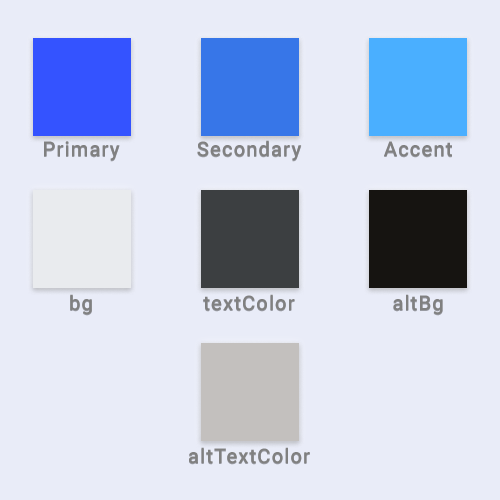
<style>
.page{position:relative;width:500px;height:500px;background:#e9ecf8}
.page>*{position:absolute;margin:0}
.t1{font:20.3px "Roboto-Medium";letter-spacing:0.05em;color:#808080}
</style>
<div class="page">
<p class="t1" style="left:44px;top:141px;width:76px;height:20px">Primary</p>
<p class="t1" style="left:197px;top:140px;width:105px;height:21px">Secondary</p>
<p class="t1" style="left:384px;top:141px;width:68px;height:16px">Accent</p>
<p class="t1" style="left:70px;top:294px;width:22px;height:21px">bg</p>
<p class="t1" style="left:203px;top:294px;width:92px;height:17px">textColor</p>
<p class="t1" style="left:393px;top:294px;width:50px;height:21px">altBg</p>
<p class="t1" style="left:189px;top:447px;width:121px;height:17px">altTextColor</p>
</div>
